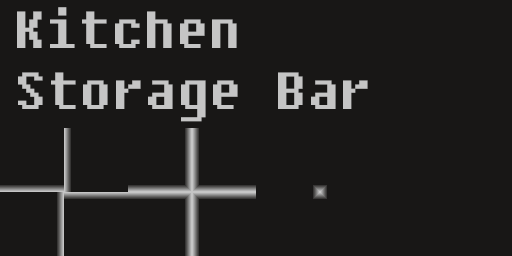
<style>
.page{position:relative;width:512px;height:256px;background:#181716}
.page>*{position:absolute;margin:0}
.t1{font:52px "Fixedsys";color:#c5c5c5}
</style>
<div class="page">
<p class="t1" style="left:17px;top:7px;width:220px;height:41px">Kitchen</p>
<p class="t1" style="left:18px;top:72px;width:220px;height:50px">Storage</p>
<p class="t1" style="left:278px;top:72px;width:90px;height:37px">Bar</p>
</div>
